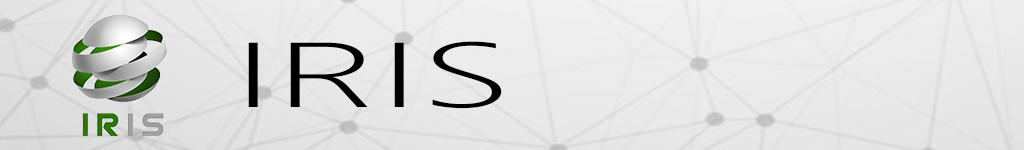
<style>
.page{position:relative;width:1024px;height:150px}
.page>*{position:absolute;margin:0}
.t1{font:85.3px "MicrosoftYaHeiUILight";color:#000000;scale:2.02 1}
</style>
<div class="page">
<p class="t1" style="left:248px;top:41px;width:254px;height:68px">IRIS</p>
</div>
